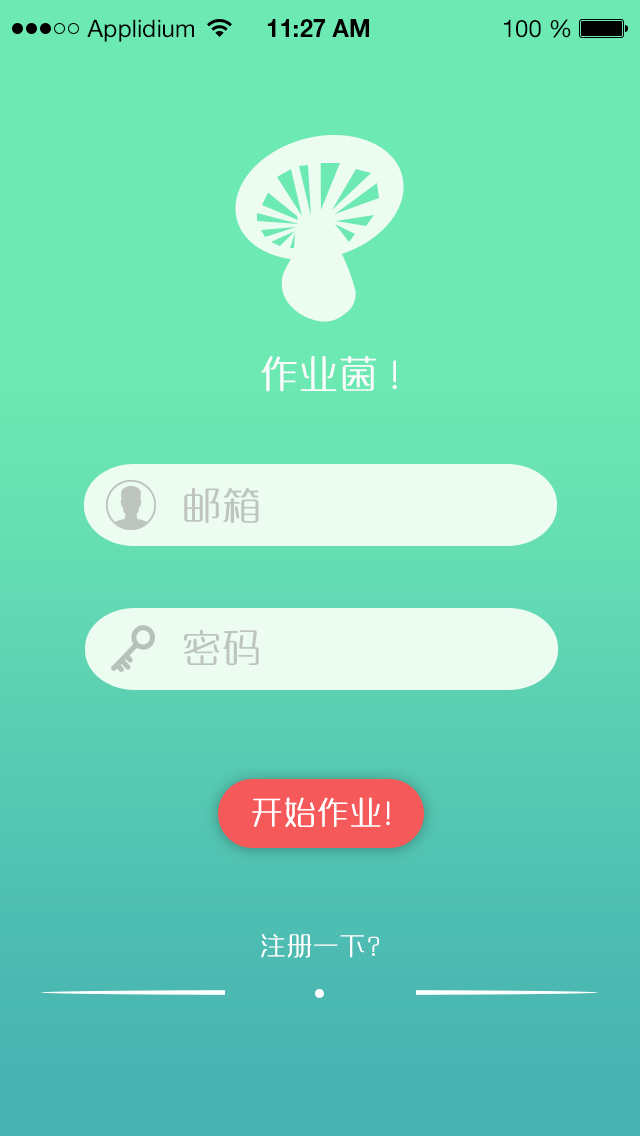
<style>
.page{position:relative;width:640px;height:1136px;background:#6de9b3}
.page>*{position:absolute;margin:0}
.t1{font:24px "HelveticaNeueLTStd-Roman";color:#000000}
.t2{font:24px "HelveticaNeueLTStd-Bd";color:#000000}
.t3{font:36px "MFYaYuan_Noncommercial-Regular";letter-spacing:0.1em;color:#fbfbfb}
.t4{font:36px "MFYaYuan_Noncommercial-Regular";letter-spacing:0.1em;color:#bec5bf}
.t5{font:30px "MFYaYuan_Noncommercial-Regular";letter-spacing:0.1em;color:#ffffff}
.t6{font:24px "MFYaYuan_Noncommercial-Regular";letter-spacing:0.1em;color:#ffffff}
</style>
<div class="page">
<p class="t1" style="left:87px;top:19px;width:107px;height:23px">Applidium</p>
<p class="t2" style="left:267px;top:19px;width:102px;height:18px">11:27 AM</p>
<p class="t1" style="left:504px;top:19px;width:67px;height:19px">100 %</p>
<p class="t3" style="left:261px;top:355px;width:136px;height:37px">作业菌 !</p>
<p class="t4" style="left:184px;top:487px;width:75px;height:37px">邮箱</p>
<p class="t4" style="left:184px;top:629px;width:75px;height:37px">密码</p>
<p class="t5" style="left:252px;top:797px;width:138px;height:30px">开始作业！</p>
<p class="t6" style="left:261px;top:934px;width:118px;height:24px">注册一下？</p>
</div>
